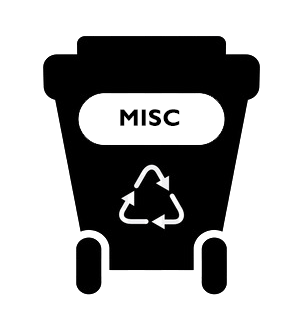
<style>
.page{position:relative;width:299px;height:309px;background:#ffffff}
.page>*{position:absolute;margin:0}
.t1{font:24px "GillSansMT-Bold";color:#000000}
</style>
<div class="page">
<p class="t1" style="left:120px;top:109px;width:60px;height:17px">MISC</p>
</div>
